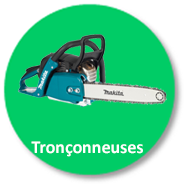
<style>
.page{position:relative;width:185px;height:185px;background:#00cc66}
.page>*{position:absolute;margin:0}
.t1{font:18px "Calibri-Bold";color:#ffffff}
</style>
<div class="page">
<p class="t1" style="left:31px;top:141px;width:112px;height:16px">Tronçonneuses</p>
</div>
